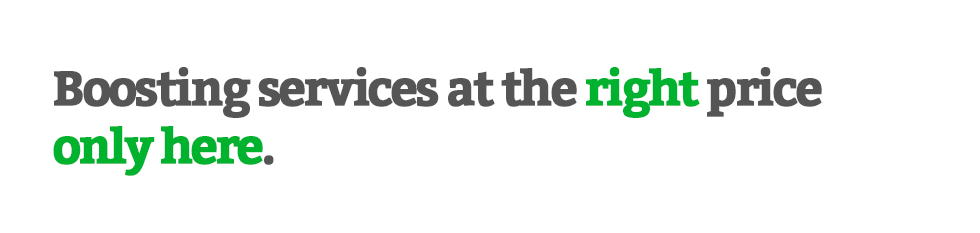
<style>
.page{position:relative;width:980px;height:233px;background:#ffffff}
.page>*{position:absolute;margin:0}
.t1{font:48px "Bitter-Bold";letter-spacing:-0.07em;color:#555555;font-weight:bold}
.t2{font:48px "Bitter-Bold";letter-spacing:-0.07em;color:#00b22d;font-weight:bold}
</style>
<div class="page">
<p class="t1" style="left:53px;top:67px;width:769px;height:109px">Boosting services at the <span class="t2">right </span>price<br><span class="t2">only here</span>.</p>
</div>
